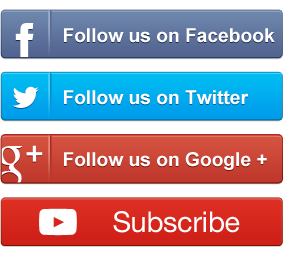
<style>
.page{position:relative;width:284px;height:256px;background:#ffffff}
.page>*{position:absolute;margin:0}
.t1{font:19.2px "Arial-BoldMT";color:#ffffff}
.t2{font:28.8px "HelveticaNeue";letter-spacing:-0.01em;color:#ffffff}
</style>
<div class="page">
<p class="t1" style="left:64px;top:28px;width:211px;height:15px">Follow us on Facebook</p>
<p class="t1" style="left:64px;top:90px;width:185px;height:15px">Follow us on Twitter</p>
<p class="t1" style="left:64px;top:152px;width:203px;height:18px">Follow us on Google +</p>
<p class="t2" style="left:113px;top:211px;width:127px;height:22px">Subscribe</p>
</div>
